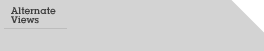
<style>
.page{position:relative;width:264px;height:51px;background:#d3d3d3}
.page>*{position:absolute;margin:0}
.t1{font:10px/9px "LubalinGraphITC-Demi";color:#3f3f3f}
</style>
<div class="page">
<p class="t1" style="left:11px;top:7px;width:45px;height:17px">Alternate<br>Views</p>
</div>
